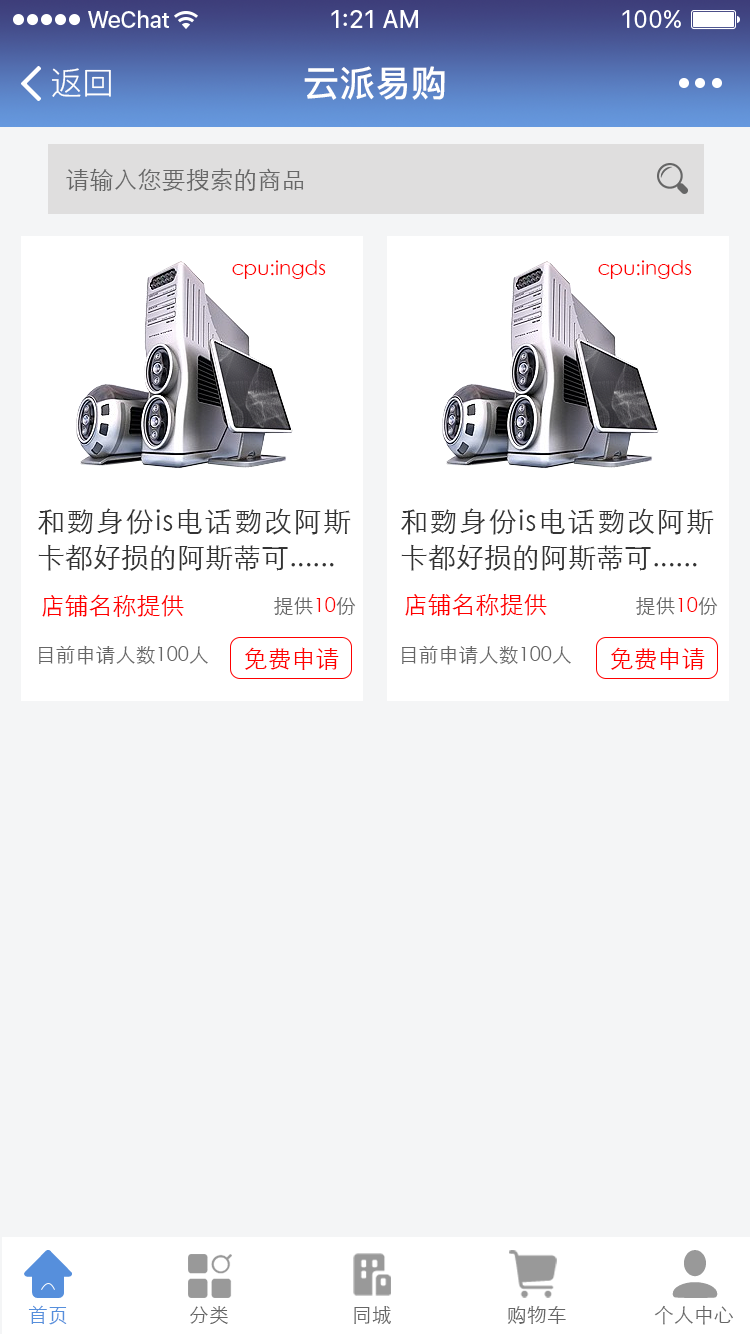
<style>
.page{position:relative;width:750px;height:1334px;background:#f4f5f6}
.page>*{position:absolute;margin:0}
.t1{font:32px "PingFang-SC-Regular";color:#ffffff}
.t2{font:36px "PingFang-SC-Bold";color:#ffffff}
.t3{font:24px "STXihei";color:#666666}
.t4{font:20px "STXihei";color:#ff0000}
.t5{font:28px/36px "STXihei";color:#333333}
.t6{font:24px "STXihei";color:#ff0000}
.t7{font:20px "STXihei";color:#666666}
.t8{font:20px "STXihei";color:#568fdc}
</style>
<div class="page">
<p class="t1" style="left:52px;top:68px;width:59px;height:29px">返回</p>
<p class="t2" style="left:304px;top:66px;width:141px;height:34px">云派易购</p>
<p class="t3" style="left:66px;top:168px;width:238px;height:23px">请输入您要搜索的商品</p>
<p class="t4" style="left:232px;top:260px;width:94px;height:19px">cpu:ingds</p>
<p class="t4" style="left:598px;top:260px;width:94px;height:19px">cpu:ingds</p>
<p class="t5" style="left:38px;top:508px;width:313px;height:63px;text-align:justify">和覅身份is电话覅改阿斯卡都好损的阿斯蒂可......</p>
<p class="t5" style="left:401px;top:508px;width:313px;height:63px;text-align:justify">和覅身份is电话覅改阿斯卡都好损的阿斯蒂可......</p>
<p class="t6" style="left:405px;top:593px;width:142px;height:23px">店铺名称提供</p>
<p class="t6" style="left:42px;top:594px;width:142px;height:23px">店铺名称提供</p>
<p class="t7" style="left:274px;top:597px;width:82px;height:19px">提供<span class="t4">10</span>份</p>
<p class="t7" style="left:636px;top:597px;width:82px;height:19px">提供<span class="t4">10</span>份</p>
<p class="t7" style="left:39px;top:645px;width:169px;height:20px">目前申请人数100人</p>
<p class="t6" style="left:245px;top:647px;width:94px;height:23px">免费申请</p>
<p class="t7" style="left:402px;top:645px;width:169px;height:20px">目前申请人数100人</p>
<p class="t6" style="left:611px;top:647px;width:94px;height:23px">免费申请</p>
<p class="t8" style="left:28px;top:1305px;width:39px;height:20px">首页</p>
<p class="t7" style="left:190px;top:1306px;width:38px;height:19px">分类</p>
<p class="t7" style="left:354px;top:1306px;width:37px;height:18px">同城</p>
<p class="t7" style="left:507px;top:1305px;width:59px;height:19px">购物车</p>
<p class="t7" style="left:654px;top:1305px;width:79px;height:20px">个人中心</p>
</div>
